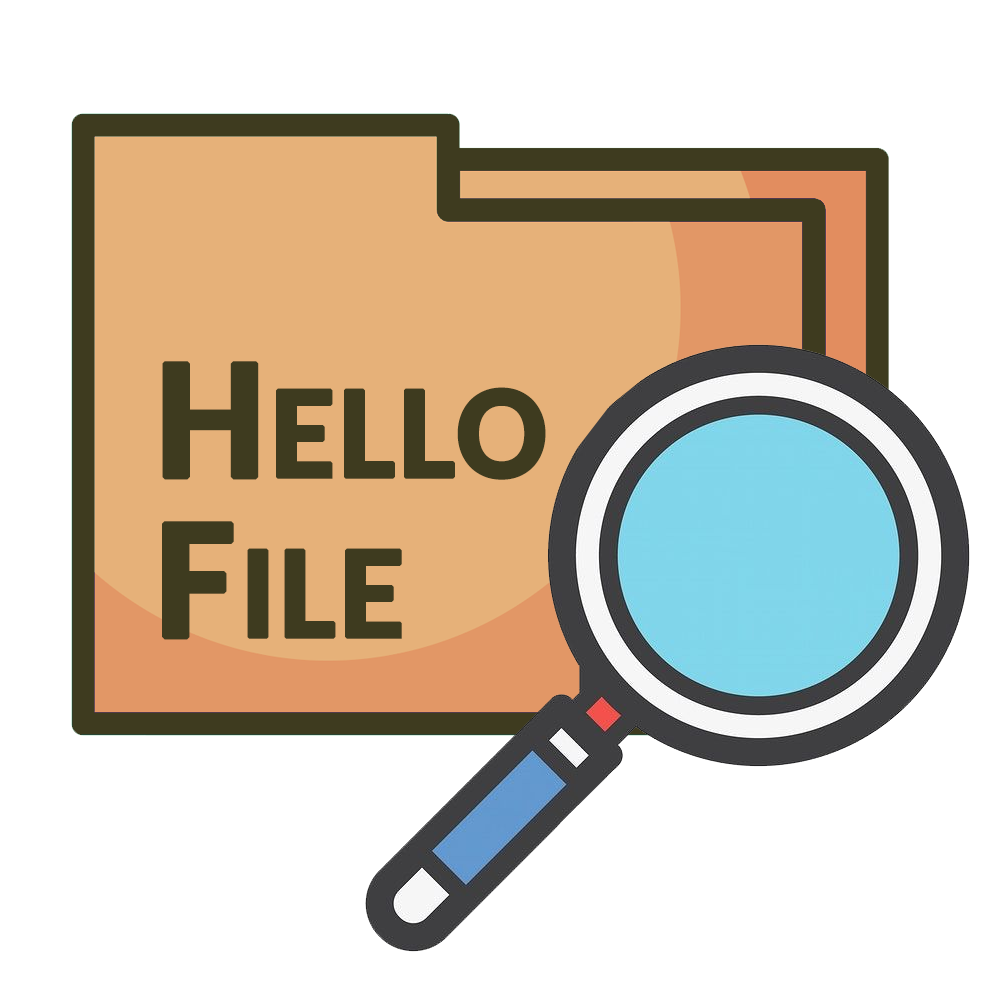
<style>
.page{position:relative;width:1000px;height:1000px;background:#ffffff}
.page>*{position:absolute;margin:0}
.t1{font:133.3px/160px "Carlito-Bold";color:#3e3b1f;font-weight:bold}
.t2{font:174.7px/160px "Carlito-Bold";color:#3e3b1f;font-weight:bold}
</style>
<div class="page">
<p class="t1" style="left:162px;top:361px;width:384px;height:279px"><span class="t2">H</span>ELLO<br><span class="t2">F</span>ILE</p>
</div>
